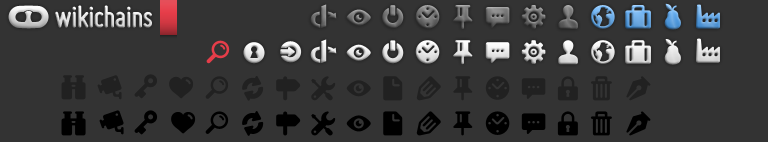
<style>
.page{position:relative;width:768px;height:142px;background:#333333}
.page>*{position:absolute;margin:0}
.t1{font:32px "Miso-Bold";letter-spacing:-0.025em}
</style>
<div class="page">
<p class="t1" style="left:55px;top:5px;width:97px;height:23px">wikichains</p>
</div>
